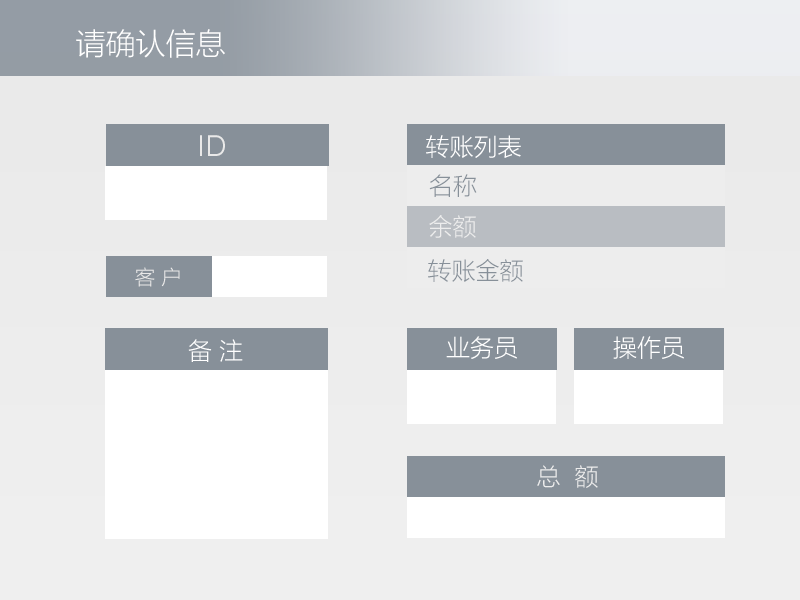
<style>
.page{position:relative;width:800px;height:600px}
.page>*{position:absolute;margin:0}
.t1{font:30px "MicrosoftYaHeiLight";color:#ffffff}
.t2{font:30px "SofiaProLight";color:#e9e9e9}
.t3{font:24px "MicrosoftYaHeiLight";color:#ffffff}
.t4{font:24px "MicrosoftYaHeiLight";color:#879099}
.t5{font:24px "MicrosoftYaHeiLight";color:#ededed}
.t6{font:20px "MicrosoftYaHeiLight";color:#e9e9e9}
</style>
<div class="page">
<p class="t1" style="left:76px;top:29px;width:149px;height:29px">请确认信息</p>
<p class="t2" style="left:200px;top:135px;width:25px;height:21px">ID</p>
<p class="t3" style="left:426px;top:135px;width:95px;height:23px">转账列表</p>
<p class="t4" style="left:429px;top:174px;width:48px;height:23px">名称</p>
<p class="t5" style="left:429px;top:215px;width:47px;height:23px">余额</p>
<p class="t6" style="left:135px;top:267px;width:45px;height:20px">客 户</p>
<p class="t4" style="left:428px;top:259px;width:95px;height:23px">转账金额</p>
<p class="t3" style="left:188px;top:339px;width:55px;height:23px">备 注</p>
<p class="t3" style="left:446px;top:336px;width:71px;height:23px">业务员</p>
<p class="t3" style="left:613px;top:336px;width:71px;height:23px">操作员</p>
<p class="t5" style="left:537px;top:465px;width:61px;height:23px">总  额</p>
</div>
